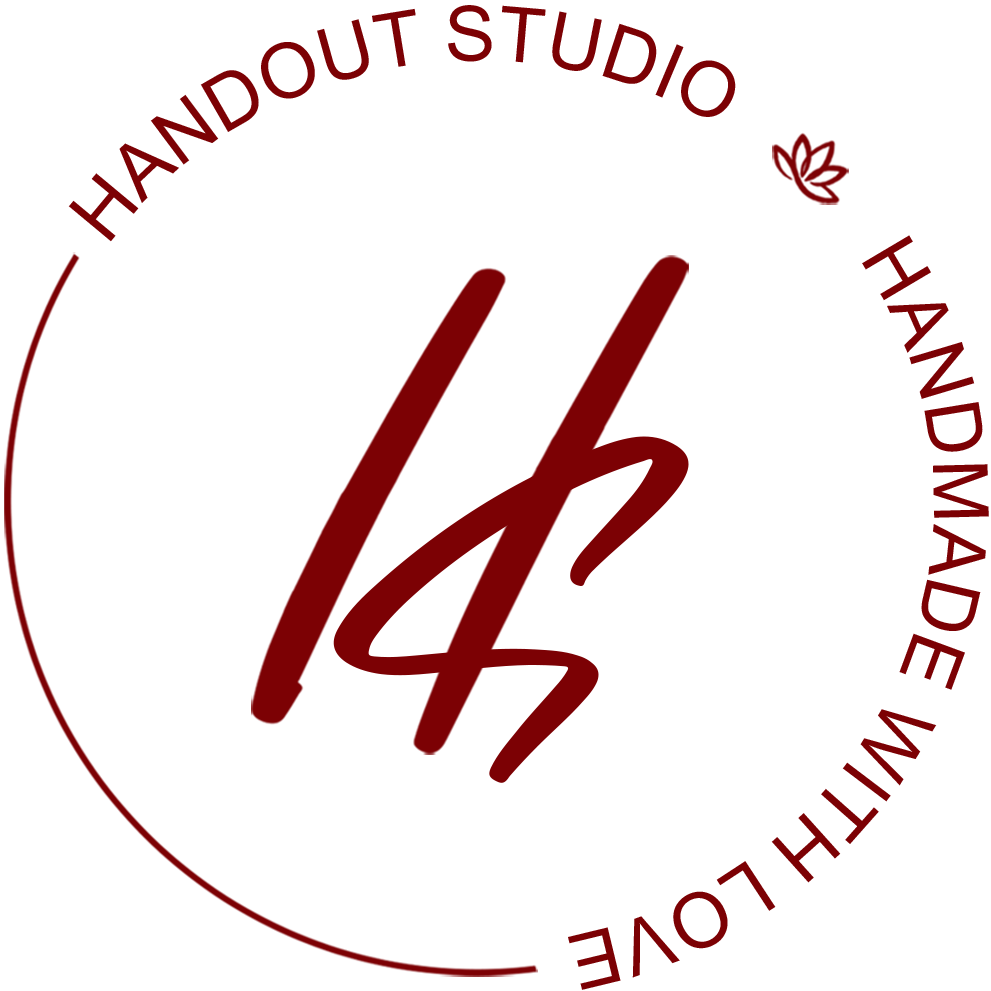
<style>
.page{position:relative;width:991px;height:991px;background:#ffffff}
.page>*{position:absolute;margin:0}
.t1{font:76.4px "ArialMT";color:#7c0104}
.t2{font:212.3px "SmoothFantasyPersonalUse";color:#7c0104}
</style>
<div class="page">
<p class="t1" style="left:68px;top:5px;width:921px;height:985px;text-align:center">HANDOUT STUDIO         HANDMADE WITH LOVE</p>
<p class="t2" style="left:333px;top:436px;width:356px;height:347px">S</p>
</div>
